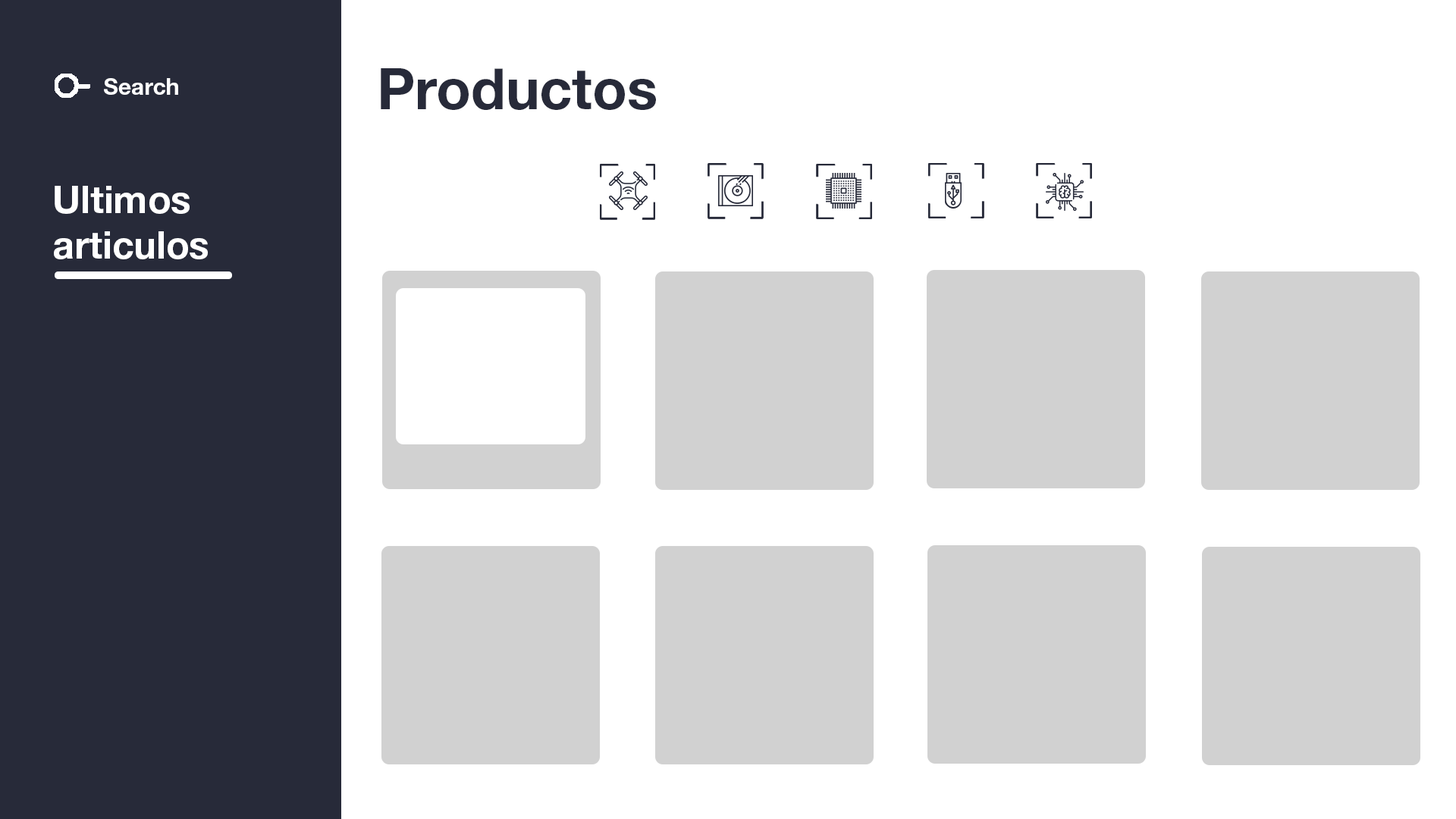
<style>
.page{position:relative;width:1456px;height:819px;background:#ffffff}
.page>*{position:absolute;margin:0}
.t1{font:56.9px "HelveticaNeue-Bold";color:#272a39}
.t2{font:22.7px "HelveticaNeue-Bold";color:#ffffff}
.t3{font:37.9px "HelveticaNeue-Bold";color:#ffffff}
</style>
<div class="page">
<p class="t1" style="left:381px;top:68px;width:275px;height:42px">Productos</p>
<p class="t2" style="left:104px;top:78px;width:74px;height:17px">Search</p>
<p class="t3" style="left:54px;top:186px;width:154px;height:73px">Ultimos<br>articulos</p>
</div>
